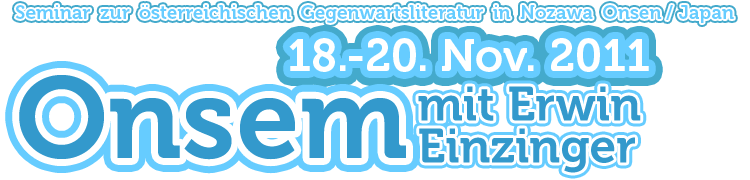
<style>
.page{position:relative;width:750px;height:180px;background:#ffffff}
.page>*{position:absolute;margin:0}
.t1{font:19px "Museo-700";color:#66ccff}
.t2{font:45px "Museo-700";color:#ffffff}
.t3{font:115px "Museo-700";color:#3399cc}
.t4{font:48px/42px "Museo-700";color:#3399cc}
</style>
<div class="page">
<p class="t1" style="left:15px;top:5px;width:719px;height:18px">Seminar zur österreichischen Gegenwartsliteratur in Nozawa Onsen / Japan</p>
<p class="t1" style="left:15px;top:5px;width:719px;height:18px">Seminar zur österreichischen Gegenwartsliteratur in Nozawa Onsen / Japan</p>
<p class="t2" style="left:289px;top:39px;width:360px;height:34px">18.-20. Nov. 2011</p>
<p class="t2" style="left:289px;top:38px;width:360px;height:34px">18.-20. Nov. 2011</p>
<p class="t3" style="left:19px;top:75px;width:387px;height:85px">Onsem</p>
<p class="t3" style="left:19px;top:75px;width:387px;height:85px">Onsem</p>
<p class="t4" style="left:418px;top:86px;width:223px;height:87px">mit Erwin<br>Einzinger</p>
<p class="t4" style="left:418px;top:86px;width:223px;height:87px">mit Erwin<br>Einzinger</p>
</div>
